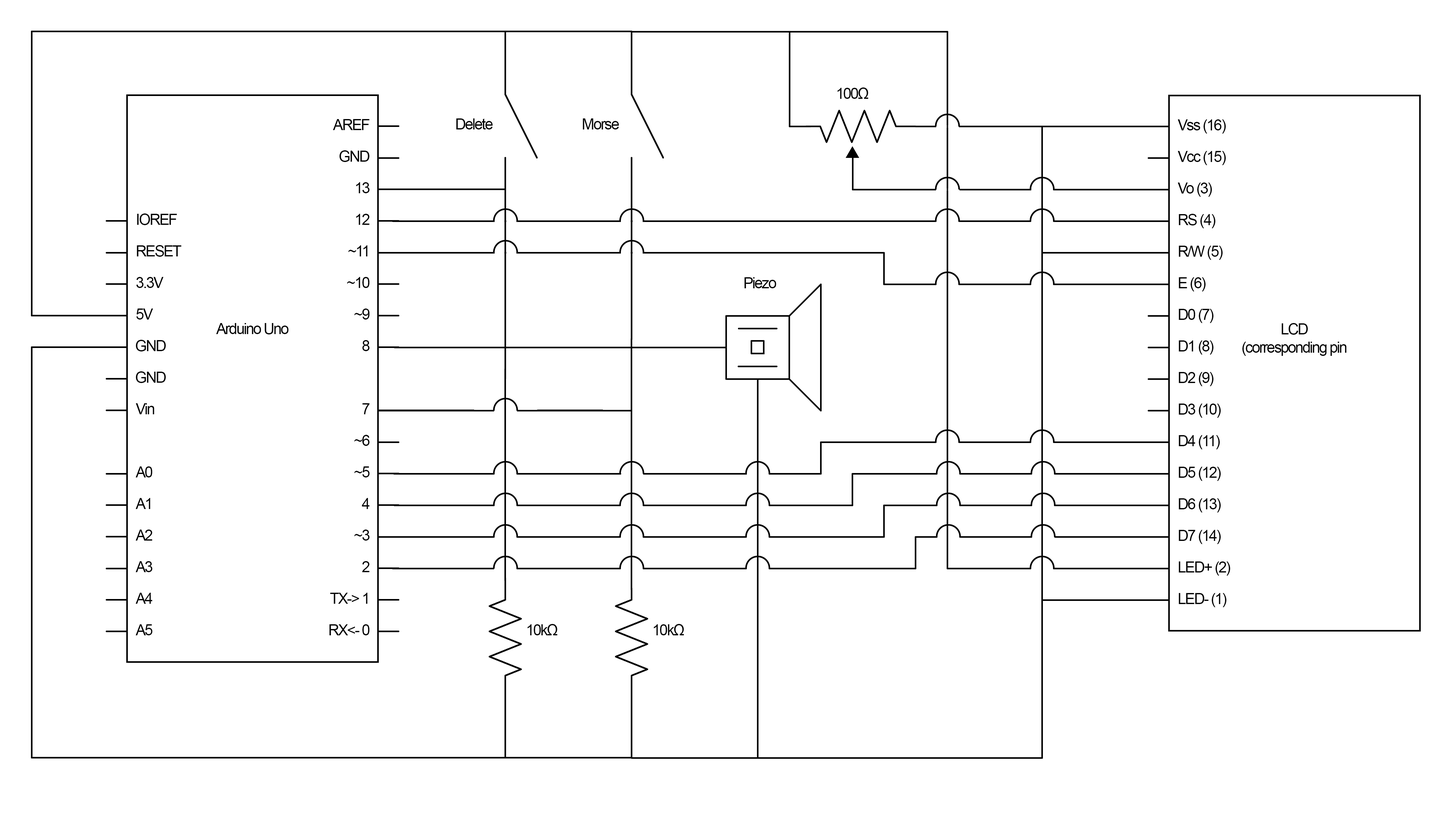
<style>
.page{position:relative;width:1452px;height:821px;background:#ffffff}
.page>*{position:absolute;margin:0}
.t1{font:15.2px "ArialMT";letter-spacing:-0.075em;color:#030303}
</style>
<div class="page">
<p class="t1" style="left:838px;top:87px;width:31px;height:12px">100Ω</p>
<p class="t1" style="left:333px;top:119px;width:37px;height:11px">AREF</p>
<p class="t1" style="left:456px;top:118px;width:37px;height:11px">Delete</p>
<p class="t1" style="left:583px;top:118px;width:36px;height:11px">Morse</p>
<p class="t1" style="left:1178px;top:119px;width:48px;height:15px">Vss (16)</p>
<p class="t1" style="left:339px;top:150px;width:31px;height:12px">GND</p>
<p class="t1" style="left:1178px;top:151px;width:48px;height:14px">Vcc (15)</p>
<p class="t1" style="left:356px;top:182px;width:14px;height:11px">13</p>
<p class="t1" style="left:1178px;top:183px;width:35px;height:14px">Vo (3)</p>
<p class="t1" style="left:137px;top:213px;width:40px;height:12px">IOREF</p>
<p class="t1" style="left:356px;top:214px;width:14px;height:11px">12</p>
<p class="t1" style="left:1179px;top:214px;width:37px;height:14px">RS (4)</p>
<p class="t1" style="left:137px;top:245px;width:45px;height:12px">RESET</p>
<p class="t1" style="left:349px;top:245px;width:19px;height:11px">~11</p>
<p class="t1" style="left:1179px;top:246px;width:44px;height:14px">R/W (5)</p>
<p class="t1" style="left:136px;top:277px;width:28px;height:11px">3.3V</p>
<p class="t1" style="left:347px;top:277px;width:23px;height:11px">~10</p>
<p class="t1" style="left:745px;top:277px;width:31px;height:11px">Piezo</p>
<p class="t1" style="left:1179px;top:277px;width:27px;height:14px">E (6)</p>
<p class="t1" style="left:136px;top:308px;width:17px;height:12px">5V</p>
<p class="t1" style="left:355px;top:308px;width:15px;height:12px">~9</p>
<p class="t1" style="left:1179px;top:309px;width:35px;height:14px">D0 (7)</p>
<p class="t1" style="left:216px;top:323px;width:73px;height:11px">Arduino Uno</p>
<p class="t1" style="left:1243px;top:323px;width:104px;height:33px;text-align:center">LCD<br>(corresponding pin number)</p>
<p class="t1" style="left:136px;top:340px;width:30px;height:11px">GND</p>
<p class="t1" style="left:362px;top:340px;width:8px;height:11px">8</p>
<p class="t1" style="left:1179px;top:340px;width:35px;height:15px">D1 (8)</p>
<p class="t1" style="left:136px;top:371px;width:30px;height:12px">GND</p>
<p class="t1" style="left:1179px;top:372px;width:35px;height:14px">D2 (9)</p>
<p class="t1" style="left:136px;top:403px;width:18px;height:11px">Vin</p>
<p class="t1" style="left:362px;top:403px;width:8px;height:11px">7</p>
<p class="t1" style="left:1179px;top:404px;width:42px;height:14px">D3 (10)</p>
<p class="t1" style="left:355px;top:435px;width:15px;height:11px">~6</p>
<p class="t1" style="left:1179px;top:435px;width:41px;height:14px">D4 (11)</p>
<p class="t1" style="left:135px;top:466px;width:18px;height:11px">A0</p>
<p class="t1" style="left:355px;top:466px;width:15px;height:11px">~5</p>
<p class="t1" style="left:1179px;top:467px;width:42px;height:14px">D5 (12)</p>
<p class="t1" style="left:135px;top:498px;width:15px;height:11px">A1</p>
<p class="t1" style="left:362px;top:498px;width:8px;height:11px">4</p>
<p class="t1" style="left:1179px;top:498px;width:42px;height:14px">D6 (13)</p>
<p class="t1" style="left:135px;top:530px;width:18px;height:11px">A2</p>
<p class="t1" style="left:355px;top:530px;width:15px;height:11px">~3</p>
<p class="t1" style="left:1179px;top:530px;width:42px;height:14px">D7 (14)</p>
<p class="t1" style="left:135px;top:561px;width:18px;height:11px">A3</p>
<p class="t1" style="left:362px;top:561px;width:8px;height:11px">2</p>
<p class="t1" style="left:1179px;top:561px;width:52px;height:15px">LED+ (2)</p>
<p class="t1" style="left:135px;top:593px;width:18px;height:11px">A4</p>
<p class="t1" style="left:330px;top:593px;width:38px;height:11px">TX-&gt; 1</p>
<p class="t1" style="left:1179px;top:593px;width:48px;height:14px">LED- (1)</p>
<p class="t1" style="left:135px;top:624px;width:18px;height:11px">A5</p>
<p class="t1" style="left:329px;top:624px;width:41px;height:11px">RX&lt;- 0</p>
<p class="t1" style="left:528px;top:624px;width:30px;height:11px">10kΩ</p>
<p class="t1" style="left:654px;top:624px;width:30px;height:11px">10kΩ</p>
</div>
